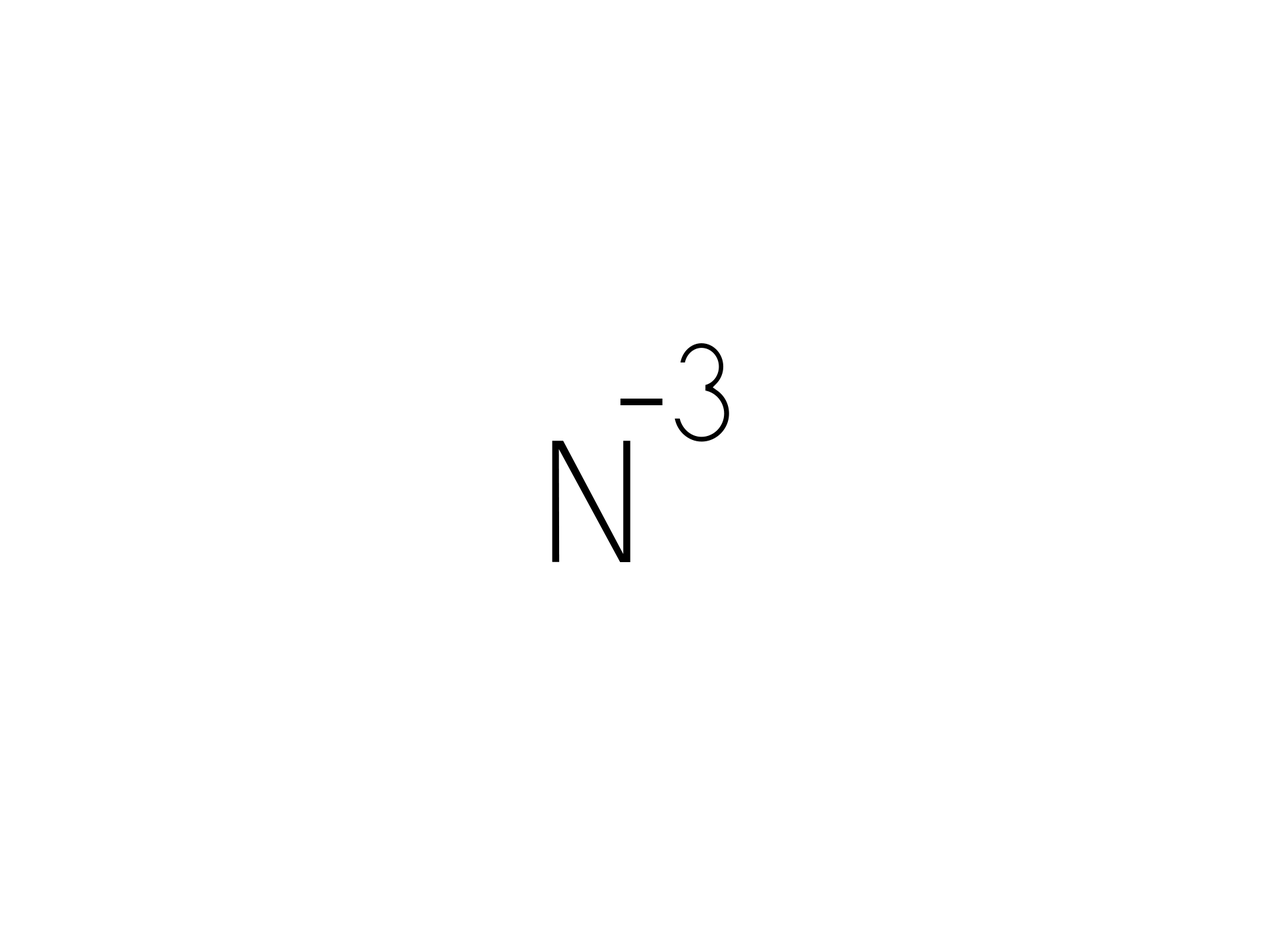
<style>
.page{position:relative;width:1261px;height:946px;background:#ffffff}
.page>*{position:absolute;margin:0}
.t1{font:138.9px "Alcubierre";color:#000000;scale:0.95 1}
.t2{font:162.1px "Alcubierre";color:#000000;scale:0.95 1}
.t3{font:173.6px "Alcubierre";color:#000000;scale:0.95 1}
</style>
<div class="page">
<p class="t1" style="left:675px;top:343px;width:54px;height:99px">3</p>
<p class="t2" style="left:620px;top:398px;width:43px;height:7px">-</p>
<p class="t3" style="left:552px;top:440px;width:79px;height:122px">N</p>
</div>
